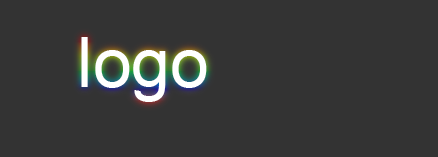
<style>
.page{position:relative;width:438px;height:157px;background:#333333}
.page>*{position:absolute;margin:0}
.t1{font:70px "ArialMT";color:#ffffff}
</style>
<div class="page">
<p class="t1" style="left:81px;top:37px;width:126px;height:65px">logo</p>
</div>
